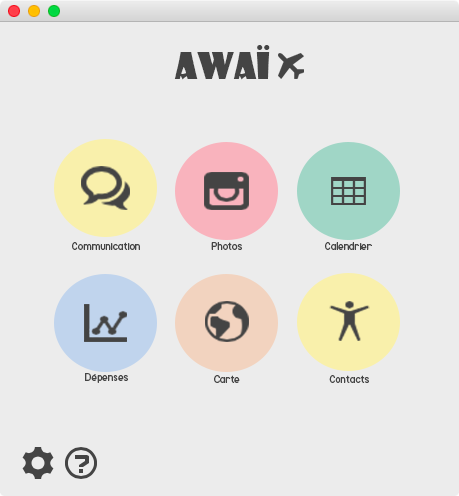
<style>
.page{position:relative;width:459px;height:496px;background:#ececec}
.page>*{position:absolute;margin:0}
.t1{font:36px "ShowcardGothic-Reg";color:#444444}
.t2{font:10px "Mockup-Regular";color:#444444}
</style>
<div class="page">
<p class="t1" style="left:174px;top:45px;width:96px;height:35px">AWAÏ</p>
<p class="t2" style="left:72px;top:242px;width:68px;height:8px">Communication</p>
<p class="t2" style="left:211px;top:242px;width:31px;height:8px">Photos</p>
<p class="t2" style="left:325px;top:242px;width:47px;height:8px">Calendrier</p>
<p class="t2" style="left:85px;top:373px;width:43px;height:10px">Dépenses</p>
<p class="t2" style="left:214px;top:375px;width:26px;height:8px">Carte</p>
<p class="t2" style="left:329px;top:375px;width:40px;height:8px">Contacts</p>
</div>
